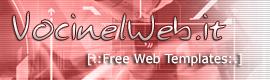
<style>
.page{position:relative;width:270px;height:80px}
.page>*{position:absolute;margin:0}
.t1{font:37px "HansonsHand"}
.t2{font:12.3px "Verdana";color:#fefafa}
</style>
<div class="page">
<p class="t1" style="left:13px;top:11px;width:213px;height:30px">VocinelWeb.it</p>
<p class="t2" style="left:88px;top:53px;width:154px;height:13px">[.:Free Web Templates:.]</p>
</div>
